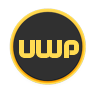
<style>
.page{position:relative;width:96px;height:96px;background:#ffffff}
.page>*{position:absolute;margin:0}
.t1{font:25.9px "Age";letter-spacing:0.01em;color:#ffdb52;scale:1.03 1}
</style>
<div class="page">
<p class="t1" style="left:19px;top:40px;width:60px;height:18px">UWP</p>
</div>
